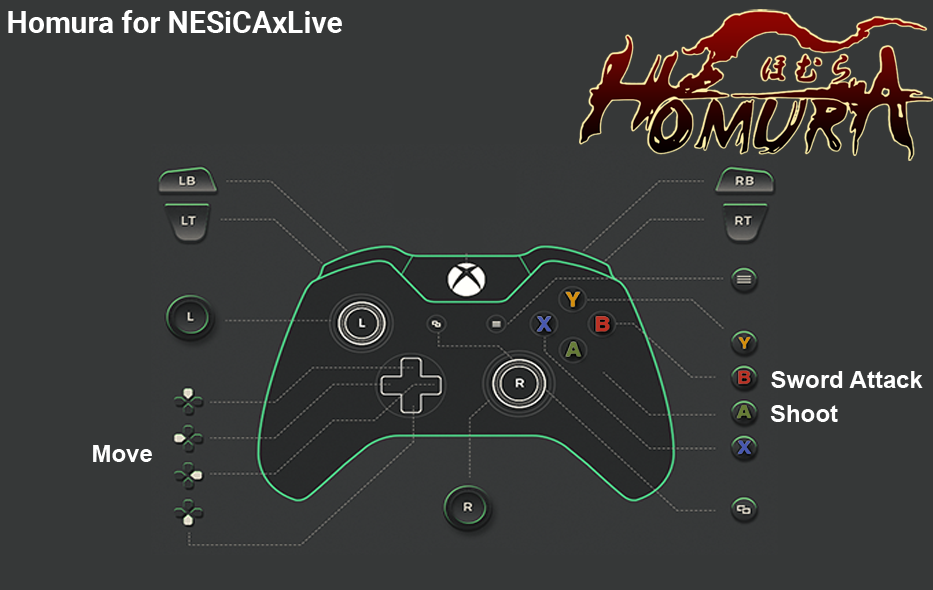
<style>
.page{position:relative;width:933px;height:590px;background:#363838}
.page>*{position:absolute;margin:0}
.t1{font:30px "Roboto-Bold";color:#ffffff}
.t2{font:24px "Arial-BoldMT";color:#fefefe}
</style>
<div class="page">
<p class="t1" style="left:8px;top:10px;width:334px;height:23px">Homura for NESiCAxLive</p>
<p class="t2" style="left:771px;top:371px;width:152px;height:17px">Sword Attack</p>
<p class="t2" style="left:770px;top:405px;width:68px;height:17px">Shoot</p>
<p class="t2" style="left:93px;top:445px;width:59px;height:17px">Move</p>
</div>
